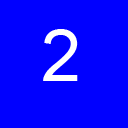
<style>
.page{position:relative;width:128px;height:128px;background:#0000ff}
.page>*{position:absolute;margin:0}
.t1{font:72px "ArialMT";color:#ffffff}
</style>
<div class="page">
<p class="t1" style="left:43px;top:29px;width:35px;height:52px">2</p>
</div>
